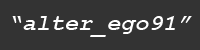
<style>
.page{position:relative;width:200px;height:50px;background:#333333}
.page>*{position:absolute;margin:0}
.t1{font:23.5px "CourierNewPS-BoldItalicMT";color:#ffffff}
</style>
<div class="page">
<p class="t1" style="left:12px;top:15px;width:180px;height:22px">“alter_ego91”</p>
</div>
